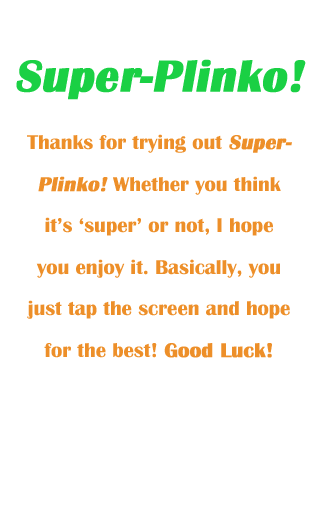
<style>
.page{position:relative;width:320px;height:512px;background:#ffffff}
.page>*{position:absolute;margin:0}
.t1{font:20.8px/41.5px "BritannicBold";color:#ed8f29}
.t2{font:45.7px/124.5px "BritannicBold";color:#1ad044;font-weight:bold;font-style:italic}
.t3{font:20.8px/58.1px "BritannicBold";color:#ed8f29}
.t4{font:20.8px/58.1px "BritannicBold";color:#ed8f29;font-weight:bold;font-style:italic}
.t5{font:20.8px/41.5px "BritannicBold";color:#ed8f29;font-weight:bold;font-style:italic}
.t6{font:20.8px/41.5px "BritannicBold";color:#ed8f29;font-weight:bold}
</style>
<div class="page">
<p class="t1" style="left:16px;top:59px;width:290px;height:299px;text-align:center"><span class="t2">Super-Plinko!<br></span><span class="t3">Thanks for trying out </span><span class="t4">Super-<br></span><span class="t5">Plinko!</span> Whether you think<br>it’s ‘super’ or not, I hope<br>you enjoy it. Basically, you<br>just tap the screen and hope<br>for the best! <span class="t6">Good Luck!</span></p>
</div>
